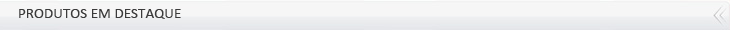
<style>
.page{position:relative;width:730px;height:30px;background:#f6f6f6}
.page>*{position:absolute;margin:0}
.t1{font:15.1px "Calibri";color:#3b3b3b}
</style>
<div class="page">
<p class="t1" style="left:19px;top:9px;width:162px;height:10px">PRODUTOS EM DESTAQUE</p>
</div>
